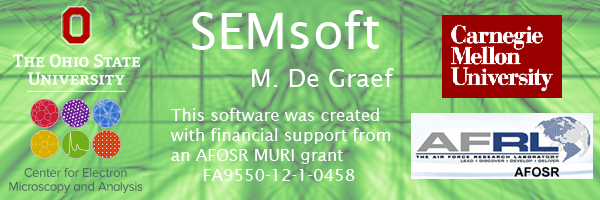
<style>
.page{position:relative;width:600px;height:200px}
.page>*{position:absolute;margin:0}
.t1{font:50px "LucidaSans";color:#ffffff}
.t2{font:25px "LucidaSans";color:#ffffff}
.t3{font:16.7px "LucidaSans";color:#ffffff}
</style>
<div class="page">
<p class="t1" style="left:192px;top:10px;width:187px;height:40px">SEMsoft</p>
<p class="t2" style="left:252px;top:68px;width:142px;height:19px">M. De Graef</p>
<p class="t3" style="left:170px;top:108px;width:221px;height:73px">This software was created<br>with financial support from<br>an AFOSR MURI grant<br>      FA9550-12-1-0458</p>
</div>
